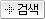
<style>
.page{position:relative;width:45px;height:19px}
.page>*{position:absolute;margin:0}
.t1{font:12px "Dotum";letter-spacing:-0.05em;color:#000000}
</style>
<div class="page">
<p class="t1" style="left:18px;top:4px;width:20px;height:11px">검색</p>
</div>
